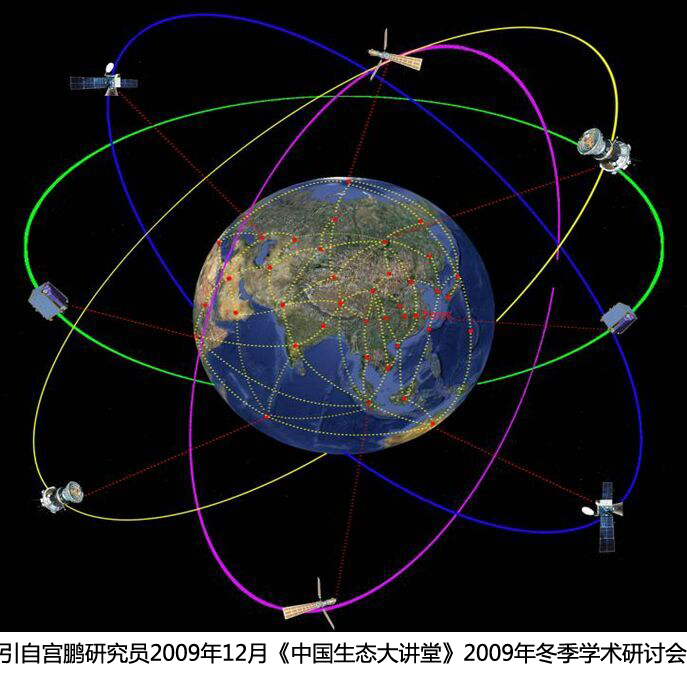
<style>
.page{position:relative;width:687px;height:677px;background:#010101}
.page>*{position:absolute;margin:0}
.t1{font:21.6px "MicrosoftYaHei";color:#000000}
</style>
<div class="page">
<p class="t1" style="left:0px;top:642px;width:687px;height:22px">引自宫鹏研究员2009年12月《中国生态大讲堂》2009年冬季学术研讨会</p>
</div>
